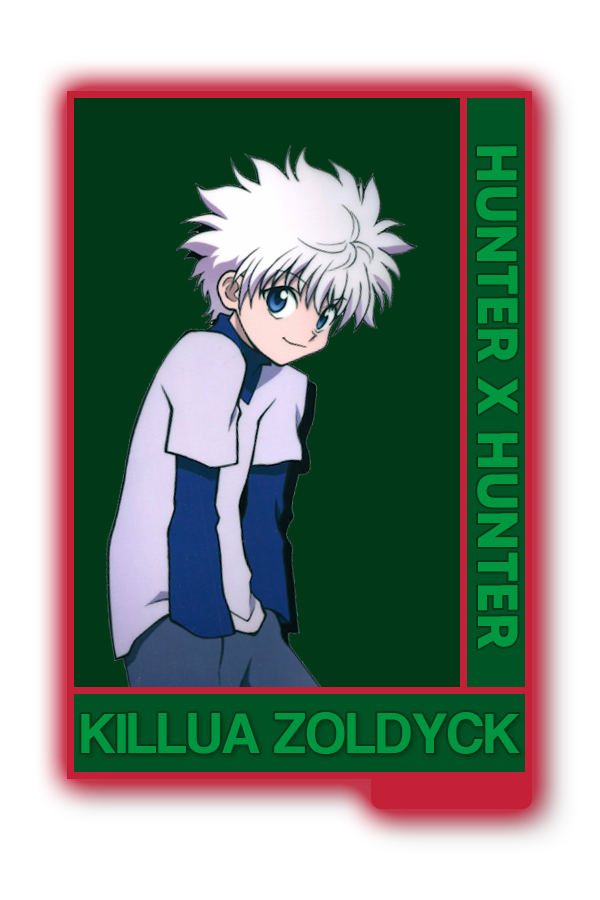
<style>
.page{position:relative;width:600px;height:900px;background:#003818}
.page>*{position:absolute;margin:0}
.t1{font:56.5px "MADETOMMY-Bold";color:#009741}
.t2{font:59.5px "CoolveticaRg-Regular";color:#009641}
</style>
<div class="page">
<p class="t1" style="left:476px;top:146px;width:42px;height:503px;rotate:90deg">HUNTER X HUNTER</p>
<p class="t2" style="left:81px;top:712px;width:439px;height:42px">KILLUA ZOLDYCK</p>
</div>
